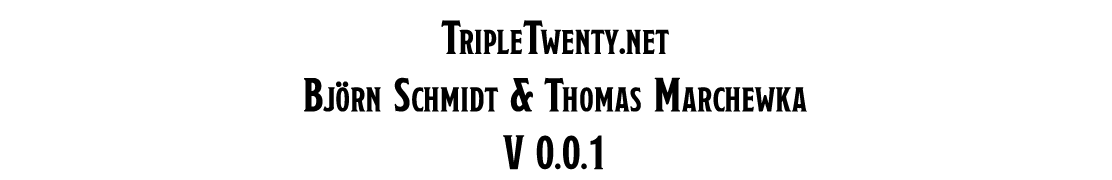
<style>
.page{position:relative;width:1112px;height:180px;background:#ffffff}
.page>*{position:absolute;margin:0}
.t1{font:48px "NodestoCapsCondensed";letter-spacing:-0.01em;color:#000000}
</style>
<div class="page">
<p class="t1" style="left:304px;top:20px;width:503px;height:150px;text-align:center">TripleTwenty.net<br>Bjorn Schmidt &amp; Thomas Marchewka<br>V 0.0.1</p>
<p class="t1" style="left:336px;top:81px;width:13px;height:6px">..</p>
</div>
